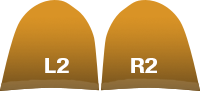
<style>
.page{position:relative;width:200px;height:91px;background:#ffffff}
.page>*{position:absolute;margin:0}
.t1{font:20.3px "HelveticaNeueLTStd-BdCn";color:#ffffff;scale:1.32 1}
</style>
<div class="page">
<p class="t1" style="left:45px;top:58px;width:24px;height:15px">L2</p>
<p class="t1" style="left:131px;top:58px;width:26px;height:15px">R2</p>
</div>
